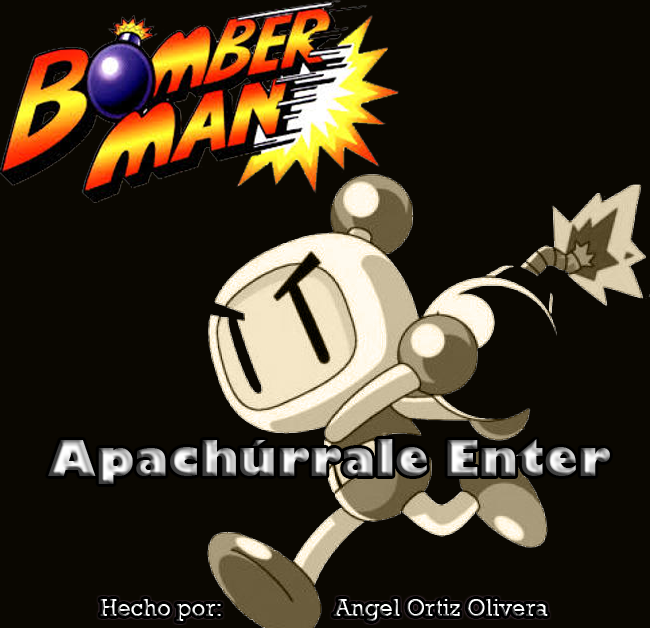
<style>
.page{position:relative;width:650px;height:628px;background:#0a0701}
.page>*{position:absolute;margin:0}
.t1{font:48px "GillSans-UltraBold"}
.t2{font:24px "Rockwell"}
</style>
<div class="page">
<p class="t1" style="left:48px;top:439px;width:562px;height:45px">Apachúrrale Enter</p>
<p class="t2" style="left:100px;top:599px;width:448px;height:22px">Hecho por:       Angel Ortiz Olivera</p>
</div>
